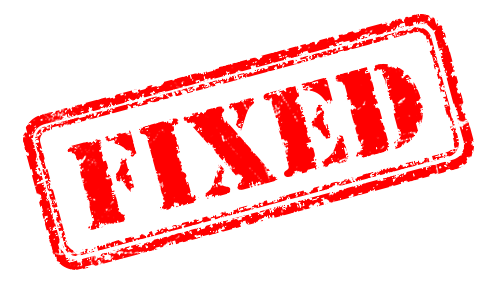
<style>
.page{position:relative;width:495px;height:289px;background:#ffffff}
.page>*{position:absolute;margin:0}
.t1{font:115.5px "StencilStd";color:#ff0000}
</style>
<div class="page">
<p class="t1" style="left:67px;top:63px;width:356px;height:167px;rotate:-15deg">FIXED</p>
</div>
